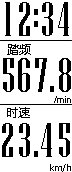
<style>
.page{position:relative;width:72px;height:172px;background:#ffffff}
.page>*{position:absolute;margin:0}
.t1{font:48px "NiagaraSolid-Reg";color:#000000}
.t2{font:12px "MicrosoftYaHei";color:#000000}
.t3{font:9px "ArialMT";color:#000000}
.t4{font:9px "MicrosoftYaHei";color:#000000}
</style>
<div class="page">
<p class="t1" style="left:5px;top:2px;width:6px;height:34px">1</p>
<p class="t1" style="left:19px;top:2px;width:11px;height:34px">2</p>
<p class="t1" style="left:42px;top:2px;width:11px;height:34px">3</p>
<p class="t1" style="left:58px;top:2px;width:11px;height:34px">4</p>
<p class="t1" style="left:34px;top:9px;width:4px;height:18px">:</p>
<p class="t2" style="left:7px;top:44px;width:24px;height:11px">踏频</p>
<p class="t1" style="left:3px;top:58px;width:11px;height:34px">5</p>
<p class="t1" style="left:18px;top:58px;width:12px;height:34px">6</p>
<p class="t1" style="left:35px;top:58px;width:12px;height:34px">7</p>
<p class="t1" style="left:59px;top:58px;width:12px;height:34px">8</p>
<p class="t3" style="left:54px;top:96px;width:17px;height:7px">/min</p>
<p class="t2" style="left:7px;top:107px;width:23px;height:11px">时速</p>
<p class="t1" style="left:2px;top:123px;width:11px;height:34px">2</p>
<p class="t1" style="left:19px;top:123px;width:11px;height:34px">3</p>
<p class="t1" style="left:41px;top:123px;width:11px;height:34px">4</p>
<p class="t1" style="left:59px;top:123px;width:11px;height:34px">5</p>
<p class="t4" style="left:50px;top:164px;width:21px;height:8px">km/h</p>
</div>
